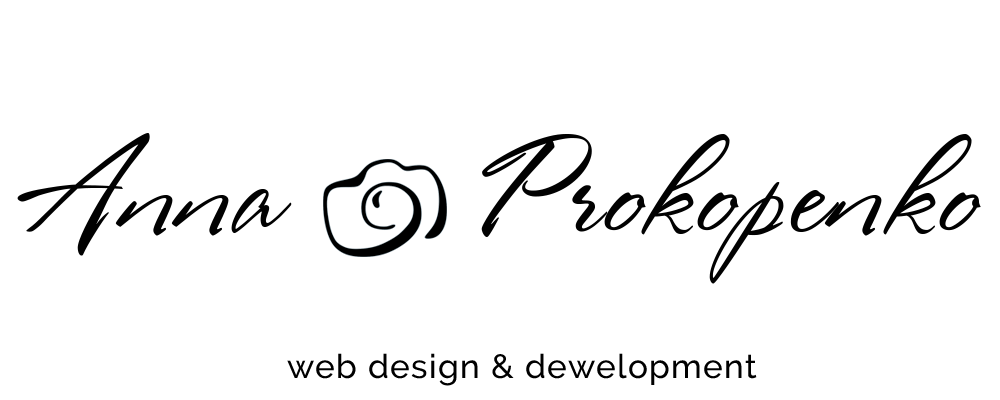
<style>
.page{position:relative;width:1000px;height:400px;background:#ffffff}
.page>*{position:absolute;margin:0}
.t1{font:125px "RosaMarena";letter-spacing:0.04em;color:#010101}
.t2{font:33.3px "Raleway-Medium";letter-spacing:0.04em;color:#000000}
</style>
<div class="page">
<p class="t1" style="left:17px;top:133px;width:964px;height:151px">Anna     Prokopenko</p>
<p class="t2" style="left:287px;top:353px;width:470px;height:33px">web design &amp; dewelopment</p>
</div>
